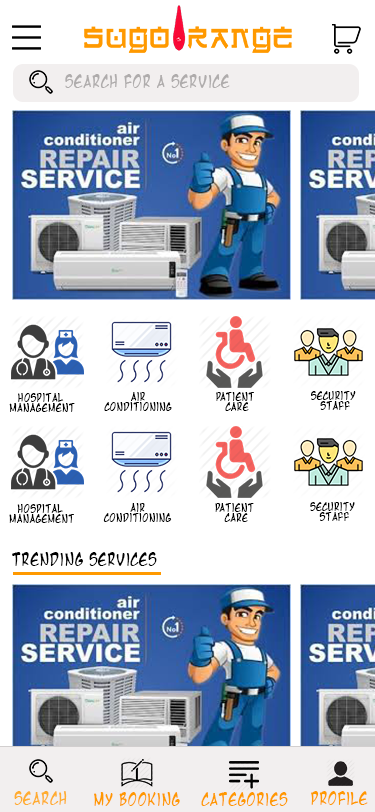
<style>
.page{position:relative;width:375px;height:812px;background:#ffffff}
.page>*{position:absolute;margin:0}
.t1{font:16.2px "MangaTemple";letter-spacing:0.05em;color:#afacac;scale:0.77 1}
.t2{font:10.8px "MangaTemple";letter-spacing:0.05em;color:#000000;scale:0.77 1}
.t3{font:11px "MangaTemple";letter-spacing:0.05em;color:#000000;scale:0.76 1}
.t4{font:16.2px "MangaTemple";letter-spacing:0.05em;color:#000000;scale:0.77 1}
.t5{font:16.2px "MangaTemple";letter-spacing:0.05em;color:#ffad30;scale:0.77 1}
.t6{font:16.2px "MangaTemple";letter-spacing:0.05em;color:#ff9900;scale:0.77 1}
</style>
<div class="page">
<p class="t1" style="left:65px;top:74px;width:165px;height:14px">search for a service</p>
<p class="t2" style="left:9px;top:393px;width:66px;height:19px;text-align:center">Hospital <br>Management</p>
<p class="t2" style="left:104px;top:392px;width:68px;height:19px;text-align:center">Air<br>conditioning</p>
<p class="t2" style="left:216px;top:392px;width:38px;height:19px;text-align:center">Patient<br> Care</p>
<p class="t2" style="left:311px;top:391px;width:45px;height:19px;text-align:center">Security <br>Staff</p>
<p class="t3" style="left:9px;top:504px;width:65px;height:19px;text-align:center">Hospital <br>Management</p>
<p class="t3" style="left:103px;top:503px;width:69px;height:19px;text-align:center">Air<br>conditioning</p>
<p class="t3" style="left:215px;top:503px;width:39px;height:19px;text-align:center">Patient<br> Care</p>
<p class="t3" style="left:310px;top:502px;width:45px;height:19px;text-align:center">Security <br>Staff</p>
<p class="t4" style="left:12px;top:552px;width:145px;height:14px">trending services</p>
<p class="t5" style="left:14px;top:791px;width:53px;height:14px">search</p>
<p class="t6" style="left:94px;top:792px;width:86px;height:14px">my booking</p>
<p class="t6" style="left:201px;top:792px;width:87px;height:14px">categories</p>
<p class="t6" style="left:311px;top:791px;width:57px;height:14px">profile</p>
</div>
